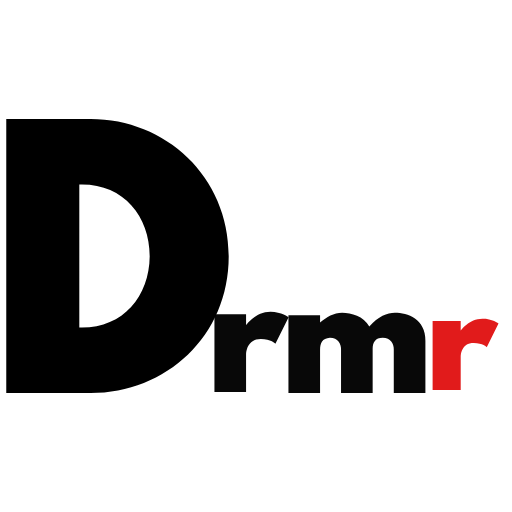
<style>
.page{position:relative;width:512px;height:512px;background:#ffffff}
.page>*{position:absolute;margin:0}
.t1{font:332px "SpartanMB-Black";color:#000000}
.t2{font:152px "SpartanMB-Black";color:#080808}
.t3{font:135px "SpartanMB-Black";color:#e11b1b}
</style>
<div class="page">
<p class="t1" style="left:6px;top:119px;width:223px;height:274px">D</p>
<p class="t2" style="left:214px;top:311px;width:75px;height:81px">r</p>
<p class="t2" style="left:288px;top:312px;width:138px;height:81px">m</p>
<p class="t3" style="left:432px;top:318px;width:67px;height:72px">r</p>
</div>
